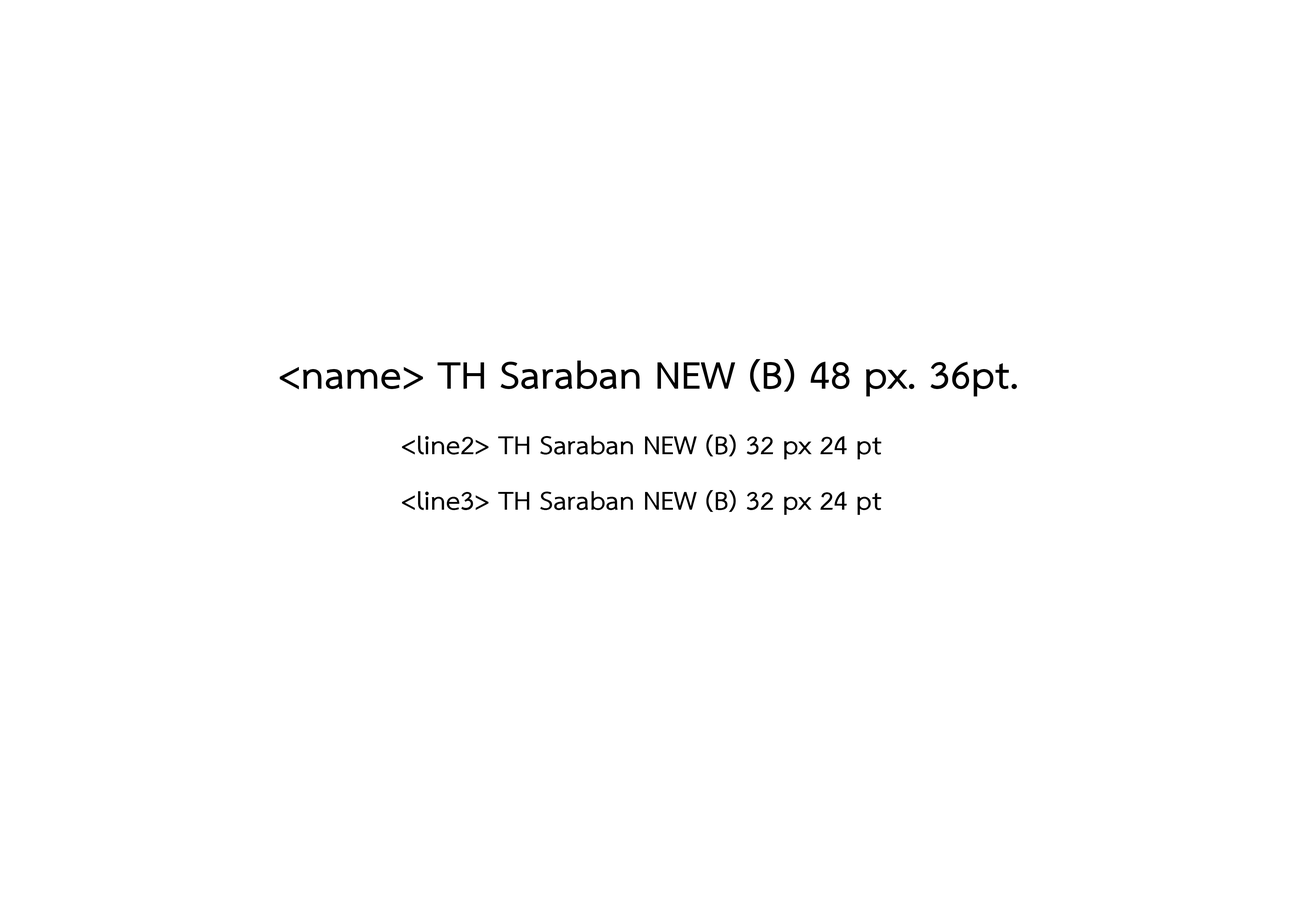
<style>
.page{position:relative;width:1299px;height:918px;background:#ffffff}
.page>*{position:absolute;margin:0}
.t1{font:55.5px "THSarabunNew-Bold";color:#000000}
.t2{font:37px "THSarabunNew-Bold";color:#000000}
</style>
<div class="page">
<p class="t1" style="left:280px;top:359px;width:737px;height:38px">&lt;name&gt; TH Saraban NEW (B) 48 px. 36pt.</p>
<p class="t2" style="left:402px;top:435px;width:479px;height:24px">&lt;line2&gt; TH Saraban NEW (B) 32 px 24 pt</p>
<p class="t2" style="left:402px;top:490px;width:479px;height:25px">&lt;line3&gt; TH Saraban NEW (B) 32 px 24 pt</p>
</div>
